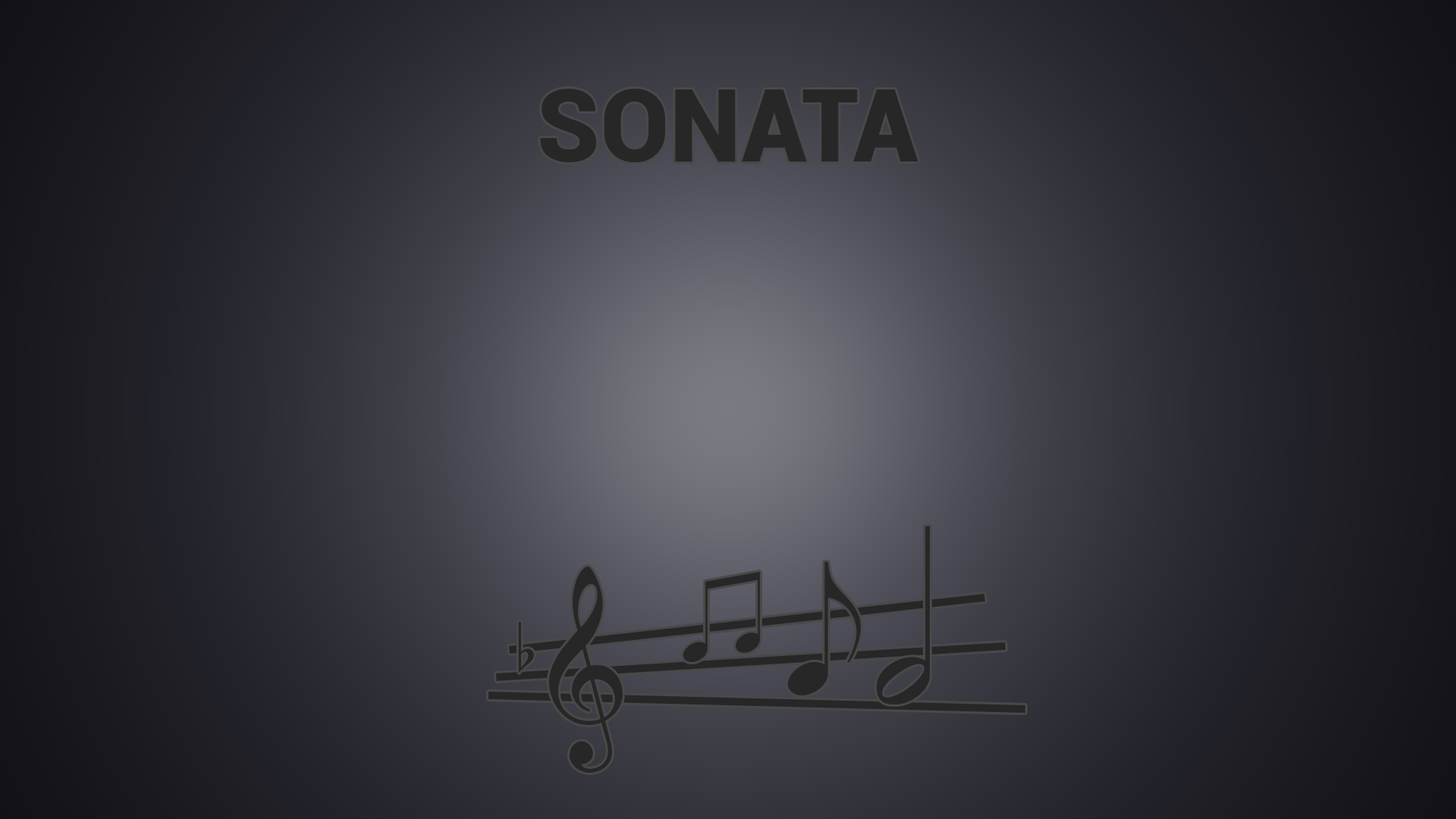
<style>
.page{position:relative;width:1456px;height:819px}
.page>*{position:absolute;margin:0}
.t1{font:101px "Roboto-Black";color:#272727}
</style>
<div class="page">
<p class="t1" style="left:540px;top:89px;width:378px;height:73px">SONATA</p>
</div>
